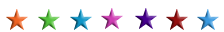
<style>
.page{position:relative;width:224px;height:32px;background:#ffffff}
.page>*{position:absolute;margin:0}
.t1{font:22.4px "UDShinMGoPr6N-Light"}
</style>
<div class="page">
<p class="t1" style="left:6px;top:9px;width:22px;height:21px">★</p>
<p class="t1" style="left:38px;top:9px;width:22px;height:21px">★</p>
<p class="t1" style="left:70px;top:9px;width:22px;height:21px">★</p>
<p class="t1" style="left:101px;top:8px;width:22px;height:21px">★</p>
<p class="t1" style="left:135px;top:8px;width:22px;height:21px">★</p>
<p class="t1" style="left:166px;top:9px;width:22px;height:21px">★</p>
<p class="t1" style="left:197px;top:9px;width:22px;height:21px">★</p>
</div>
